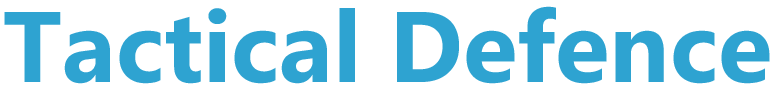
<style>
.page{position:relative;width:775px;height:88px;background:#ffffff}
.page>*{position:absolute;margin:0}
.t1{font:100px "MicrosoftPhagsPa-Bold";color:#2ea4d2}
</style>
<div class="page">
<p class="t1" style="left:4px;top:6px;width:766px;height:78px">Tactical Defence</p>
</div>
